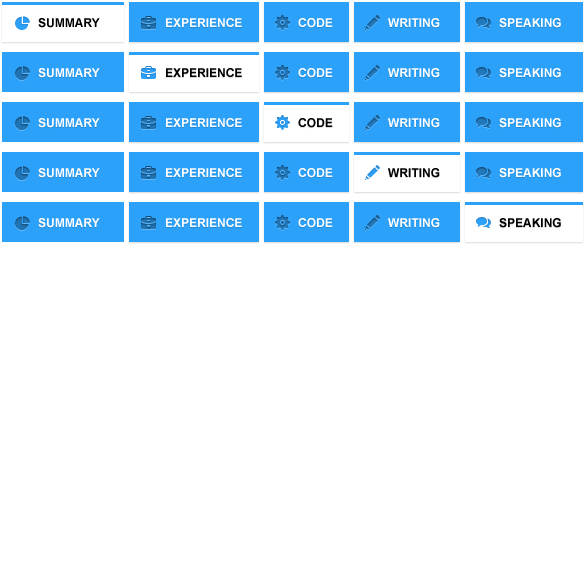
<style>
.page{position:relative;width:585px;height:585px;background:#ffffff}
.page>*{position:absolute;margin:0}
.t1{font:12px "Arial-BoldMT";color:#000000;text-transform:uppercase}
.t2{font:12px "Arial-BoldMT";color:#ffffff;text-transform:uppercase}
.t3{font:12px "Arial-BoldMT";color:#010000;text-transform:uppercase}
</style>
<div class="page">
<p class="t1" style="left:38px;top:18px;width:62px;height:10px">Summary</p>
<p class="t2" style="left:166px;top:18px;width:76px;height:9px">Experience</p>
<p class="t2" style="left:298px;top:18px;width:35px;height:10px">Code</p>
<p class="t2" style="left:388px;top:18px;width:52px;height:10px">Writing</p>
<p class="t2" style="left:499px;top:18px;width:62px;height:10px">Speaking</p>
<p class="t2" style="left:38px;top:68px;width:62px;height:10px">Summary</p>
<p class="t1" style="left:166px;top:68px;width:76px;height:9px">Experience</p>
<p class="t2" style="left:298px;top:68px;width:35px;height:10px">Code</p>
<p class="t2" style="left:388px;top:68px;width:52px;height:10px">Writing</p>
<p class="t2" style="left:499px;top:68px;width:62px;height:10px">Speaking</p>
<p class="t2" style="left:38px;top:118px;width:62px;height:10px">Summary</p>
<p class="t2" style="left:166px;top:118px;width:76px;height:9px">Experience</p>
<p class="t1" style="left:298px;top:118px;width:35px;height:10px">Code</p>
<p class="t2" style="left:388px;top:118px;width:52px;height:10px">Writing</p>
<p class="t2" style="left:499px;top:118px;width:62px;height:10px">Speaking</p>
<p class="t2" style="left:38px;top:168px;width:62px;height:10px">Summary</p>
<p class="t2" style="left:166px;top:168px;width:76px;height:9px">Experience</p>
<p class="t2" style="left:298px;top:168px;width:35px;height:10px">Code</p>
<p class="t1" style="left:388px;top:168px;width:52px;height:10px">Writing</p>
<p class="t2" style="left:499px;top:168px;width:62px;height:10px">Speaking</p>
<p class="t2" style="left:38px;top:218px;width:62px;height:10px">Summary</p>
<p class="t2" style="left:166px;top:218px;width:76px;height:9px">Experience</p>
<p class="t2" style="left:298px;top:218px;width:35px;height:10px">Code</p>
<p class="t2" style="left:388px;top:218px;width:52px;height:10px">Writing</p>
<p class="t3" style="left:499px;top:218px;width:62px;height:10px">Speaking</p>
</div>
